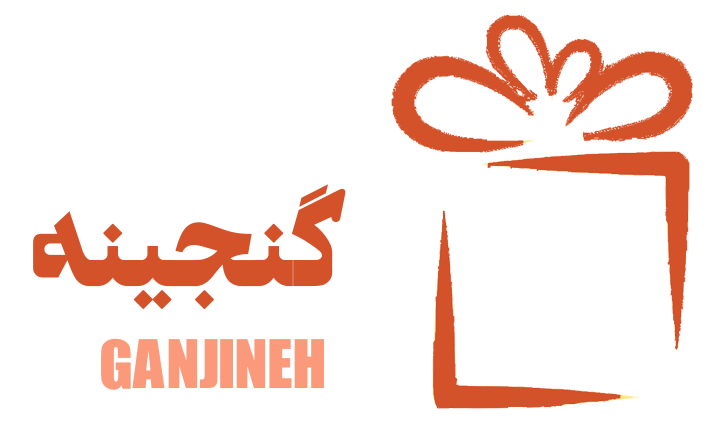
<style>
.page{position:relative;width:706px;height:426px;background:#ffffff}
.page>*{position:absolute;margin:0}
.t1{font:154.9px "Ordibehesht-bold";color:#d3522a}
.t2{font:103px "Ordibehesht-bold";color:#fb997b}
</style>
<div class="page">
<p class="t1" style="left:33px;top:184px;width:313px;height:126px">گنجینه</p>
<p class="t2" style="left:101px;top:338px;width:223px;height:52px">GANJINEH</p>
</div>
